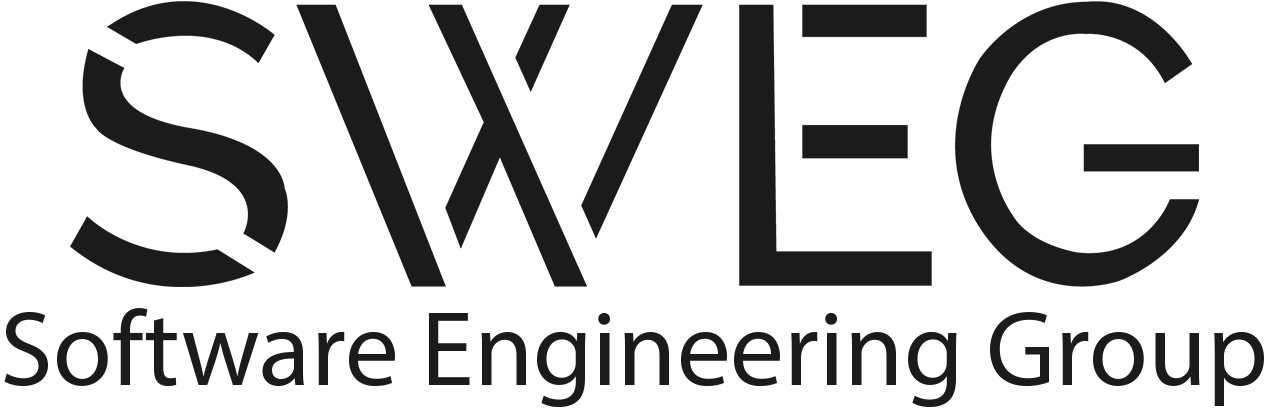
<style>
.page{position:relative;width:1268px;height:410px;background:#ffffff}
.page>*{position:absolute;margin:0}
.t1{font:107px "MyriadPro-Regular";color:#1b1b1b}
</style>
<div class="page">
<p class="t1" style="left:4px;top:308px;width:1260px;height:100px">Software Engineering Group</p>
</div>
